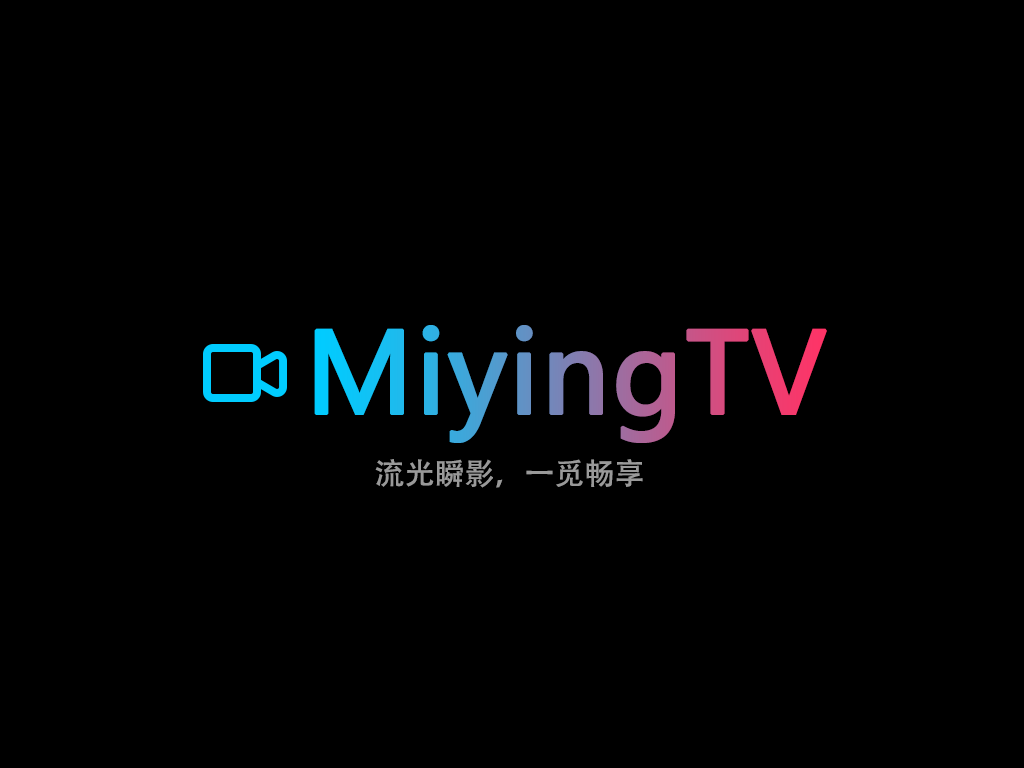
<style>
.page{position:relative;width:1024px;height:768px;background:#000000}
.page>*{position:absolute;margin:0}
.t1{font:110px "MicrosoftYaHei";font-weight:bold}
.t2{font:30px "MicrosoftYaHei";color:#999999}
</style>
<div class="page">
<p class="t1" style="left:314px;top:325px;width:513px;height:118px">MiyingTV</p>
<p class="t2" style="left:375px;top:459px;width:268px;height:29px">流光瞬影，一觅畅享</p>
</div>
